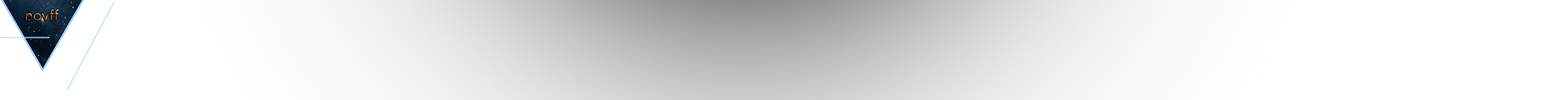
<style>
.page{position:relative;width:1568px;height:100px;background:#ffffff}
.page>*{position:absolute;margin:0}
.t1{font:15.1px "Leelawadee"}
</style>
<div class="page">
<p class="t1" style="left:25px;top:9px;width:34px;height:12px">novff</p>
</div>
